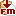
<style>
.page{position:relative;width:16px;height:16px;background:#7e1212}
.page>*{position:absolute;margin:0}
.t1{font:8px "Kroeger0565";color:#7e1212}
</style>
<div class="page">
<p class="t1" style="left:1px;top:9px;width:14px;height:5px">FM</p>
</div>
